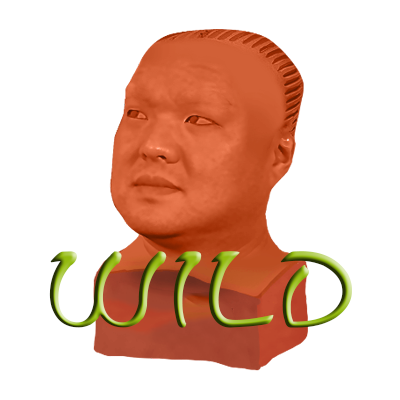
<style>
.page{position:relative;width:400px;height:400px;background:#ffffff}
.page>*{position:absolute;margin:0}
.t1{font:114px "TreasureIsland"}
</style>
<div class="page">
<p class="t1" style="left:49px;top:251px;width:303px;height:77px">WILD</p>
</div>
